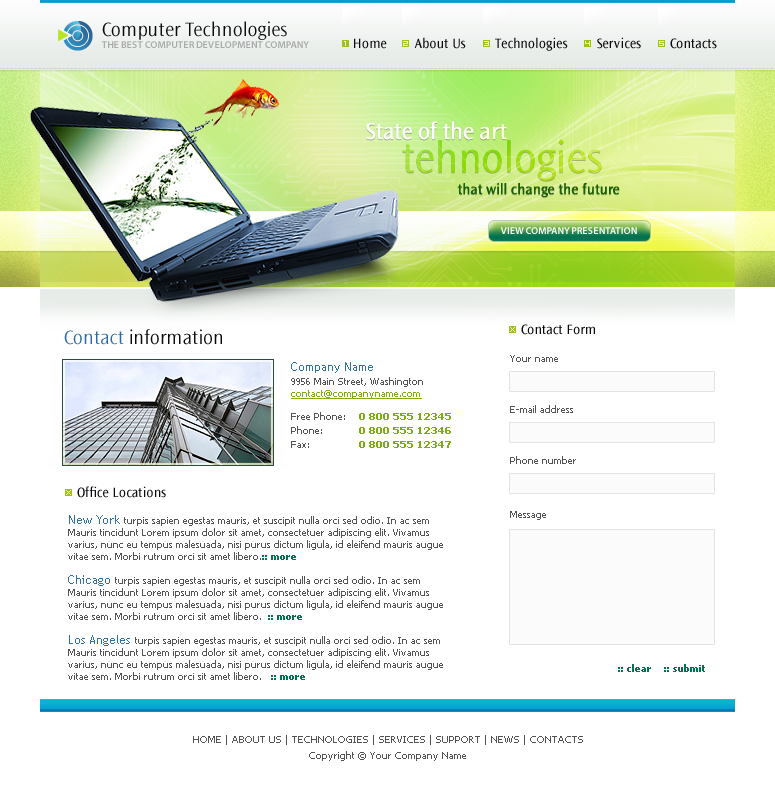
<style>
.page{position:relative;width:775px;height:790px;background:#ffffff}
.page>*{position:absolute;margin:0}
.t1{font:20px "OceanSansStd-Light";color:#0a0b0d}
.t2{font:10px "MyriadPro-Semibold";color:#a8aba9}
.t3{font:9px "BitLow";color:#ecf3cf}
.t4{font:14px "OceanSansStd-Book";color:#0a0b0d}
.t5{font:24px "OceanSansStd-Book";color:#ffffff}
.t6{font:44px "OceanSansStd-Light"}
.t7{font:15px "OceanSansStd-Book";color:#195f07}
.t8{font:10px "MyriadPro-Semibold";color:#ffffff}
.t9{font:20px "OceanSansStd-Light";color:#2c6b9f}
.t10{font:12px "TrebuchetMS";color:#2d72a5}
.t11{font:10px "Tahoma";color:#535353}
.t12{font:10px/12px "Tahoma";color:#535353}
.t13{font:10px/12px "Tahoma";color:#7baf10;text-decoration:underline}
.t14{font:10px/14px "Tahoma";color:#535353}
.t15{font:10px/14px "Tahoma-Bold";color:#7baf10}
.t16{font:12px/12px "TrebuchetMS";color:#2d72a5}
.t17{font:10px/12px "Tahoma-Bold";color:#017351}
.t18{font:10px "Tahoma-Bold";color:#017351}
.t19{font:10px/16px "Tahoma";color:#535353}
</style>
<div class="page">
<p class="t1" style="left:102px;top:21px;width:185px;height:19px">Computer Technologies</p>
<p class="t2" style="left:101px;top:41px;width:208px;height:7px">THE BEST COMPUTER DEVELOPMENT COMPANY</p>
<p class="t3" style="left:344px;top:41px;width:2px;height:5px">1</p>
<p class="t4" style="left:354px;top:38px;width:33px;height:11px">Home</p>
<p class="t3" style="left:403px;top:41px;width:5px;height:5px">2</p>
<p class="t4" style="left:414px;top:37px;width:52px;height:12px">About Us</p>
<p class="t3" style="left:484px;top:41px;width:5px;height:5px">3</p>
<p class="t4" style="left:495px;top:37px;width:73px;height:14px">Technologies</p>
<p class="t3" style="left:585px;top:41px;width:5px;height:5px">4</p>
<p class="t4" style="left:597px;top:37px;width:44px;height:12px">Services</p>
<p class="t3" style="left:659px;top:41px;width:5px;height:5px">5</p>
<p class="t4" style="left:670px;top:38px;width:47px;height:11px">Contacts</p>
<p class="t5" style="left:366px;top:121px;width:141px;height:19px">State of the art</p>
<p class="t6" style="left:402px;top:139px;width:200px;height:42px">tehnologies</p>
<p class="t7" style="left:457px;top:182px;width:163px;height:15px">that will change the future</p>
<p class="t8" style="left:500px;top:227px;width:137px;height:7px">VIEW COMPANY PRESENTATION</p>
<p class="t1" style="left:64px;top:329px;width:158px;height:16px"><span class="t9">Contact </span>information</p>
<p class="t3" style="left:510px;top:327px;width:5px;height:5px">X</p>
<p class="t4" style="left:521px;top:324px;width:74px;height:11px">Contact Form</p>
<p class="t10" style="left:291px;top:362px;width:82px;height:11px">Company Name</p>
<p class="t11" style="left:510px;top:355px;width:48px;height:7px">Your name</p>
<p class="t12" style="left:291px;top:377px;width:132px;height:22px">9956 Main Street, Washington<br><span class="t13">contact@companyname.com</span></p>
<p class="t14" style="left:291px;top:412px;width:54px;height:36px">Free Phone:<br>Phone:<br>Fax:</p>
<p class="t15" style="left:359px;top:413px;width:92px;height:35px;text-align:right">0 800 555 12345<br>0 800 555 12346<br>0 800 555 12347</p>
<p class="t11" style="left:510px;top:405px;width:63px;height:8px">E-mail address</p>
<p class="t11" style="left:510px;top:456px;width:66px;height:8px">Phone number</p>
<p class="t4" style="left:77px;top:486px;width:89px;height:12px">Office Locations</p>
<p class="t3" style="left:66px;top:490px;width:5px;height:5px">X</p>
<p class="t12" style="left:68px;top:515px;width:375px;height:165px"><span class="t16">New York </span>turpis sapien egestas mauris, et suscipit nulla orci sed odio. In ac sem Mauris tincidunt Lorem ipsum dolor sit amet, consectetuer adipiscing elit. Vivamus varius, nunc eu tempus malesuada, nisi purus dictum ligula, id eleifend mauris augue vitae sem. Morbi rutrum orci sit amet libero.<span class="t17">:: more<br><br></span><span class="t16">Chicago </span>turpis sapien egestas mauris, et suscipit nulla orci sed odio. In ac sem Mauris tincidunt Lorem ipsum dolor sit amet, consectetuer adipiscing elit. Vivamus varius, nunc eu tempus malesuada, nisi purus dictum ligula, id eleifend mauris augue vitae sem. Morbi rutrum orci sit amet libero. <span class="t17"> :: more<br><br></span><span class="t16">Los Angeles </span>turpis sapien egestas mauris, et suscipit nulla orci sed odio. In ac sem Mauris tincidunt Lorem ipsum dolor sit amet, consectetuer adipiscing elit. Vivamus varius, nunc eu tempus malesuada, nisi purus dictum ligula, id eleifend mauris augue vitae sem. Morbi rutrum orci sit amet libero.  <span class="t17"> :: more</span></p>
<p class="t11" style="left:510px;top:511px;width:36px;height:9px">Message</p>
<p class="t18" style="left:618px;top:664px;width:87px;height:8px">:: clear    :: submit</p>
<p class="t19" style="left:193px;top:735px;width:390px;height:26px;text-align:center">HOME | ABOUT US | TECHNOLOGIES | SERVICES | SUPPORT | NEWS | CONTACTS<br>Copyright © Your Company Name</p>
</div>
